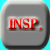
<style>
.page{position:relative;width:50px;height:50px;background:#808080}
.page>*{position:absolute;margin:0}
.t1{font:14px "MyungjoXB-HM"}
</style>
<div class="page">
<p class="t1" style="left:8px;top:18px;width:34px;height:12px">INSP.</p>
</div>
